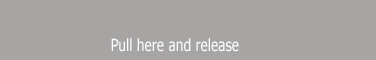
<style>
.page{position:relative;width:376px;height:60px;background:#a7a4a4}
.page>*{position:absolute;margin:0}
.t1{font:16.7px "Tahoma";color:#fefefe;scale:0.83 1}
</style>
<div class="page">
<p class="t1" style="left:111px;top:38px;width:128px;height:14px">Pull here and release</p>
</div>
